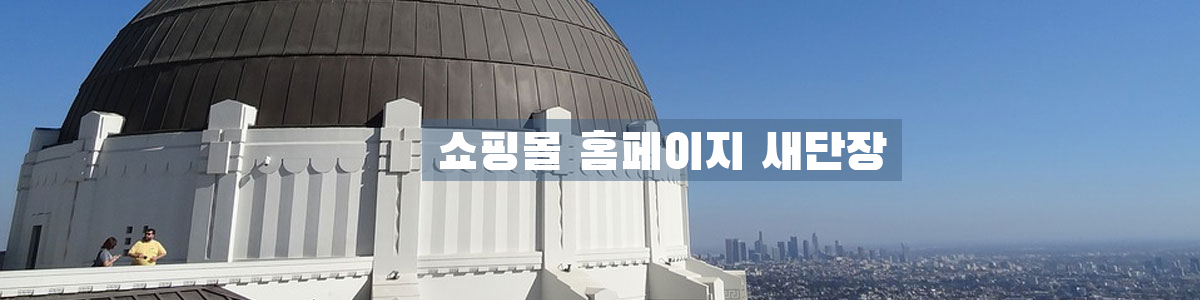
<style>
.page{position:relative;width:1200px;height:300px}
.page>*{position:absolute;margin:0}
.t1{font:50px "BlackHanSans-Regular";color:#fefefe}
</style>
<div class="page">
<p class="t1" style="left:440px;top:130px;width:447px;height:40px">쇼핑몰 홈페이지 새단장</p>
</div>
